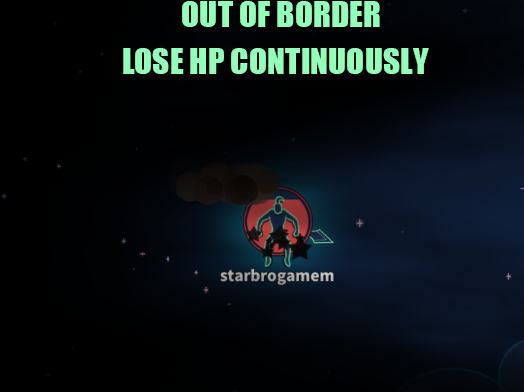
<style>
.page{position:relative;width:524px;height:392px}
.page>*{position:absolute;margin:0}
.t1{font:33.3px "Impact";color:#94ffb9}
</style>
<div class="page">
<p class="t1" style="left:182px;top:1px;width:198px;height:26px">OUT OF BORDER</p>
<p class="t1" style="left:123px;top:48px;width:306px;height:26px">LOSE HP CONTINUOUSLY</p>
</div>
